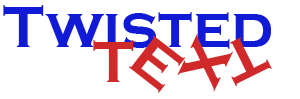
<style>
.page{position:relative;width:300px;height:99px;background:#ffffff}
.page>*{position:absolute;margin:0}
.t1{font:60px "CopperplateGothic-Bold";color:#111ad5}
.t2{font:60px "CopperplateGothic-Bold";color:#cf2929}
</style>
<div class="page">
<p class="t1" style="left:3px;top:5px;width:268px;height:44px">Twisted</p>
<p class="t2" style="left:93px;top:40px;width:41px;height:42px">T</p>
<p class="t2" style="left:128px;top:35px;width:58px;height:58px;rotate:38deg">E</p>
<p class="t2" style="left:177px;top:34px;width:56px;height:58px;rotate:116deg">X</p>
<p class="t2" style="left:229px;top:37px;width:43px;height:50px;rotate:154deg">T</p>
</div>
